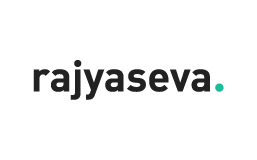
<style>
.page{position:relative;width:257px;height:160px;background:#ffffff}
.page>*{position:absolute;margin:0}
.t1{font:42px "DIN-BoldAlternate";color:#222222}
.t2{font:46px "DIN-BoldAlternate";color:#1abc9c}
</style>
<div class="page">
<p class="t1" style="left:33px;top:60px;width:191px;height:40px">rajyaseva<span class="t2">.</span></p>
</div>
